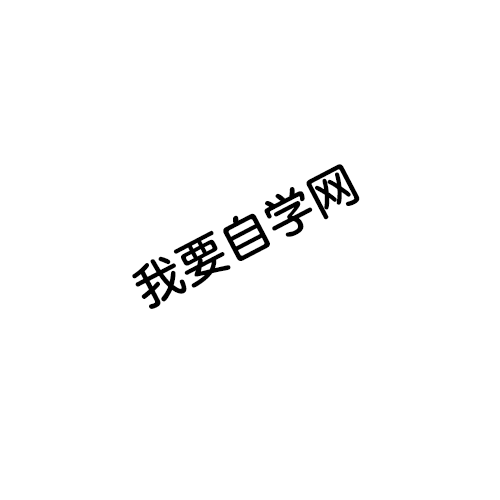
<style>
.page{position:relative;width:500px;height:500px;background:#ffffff}
.page>*{position:absolute;margin:0}
.t1{font:49px "Tensentype-JiaLiDaYuanJ";color:#000000}
</style>
<div class="page">
<p class="t1" style="left:132px;top:164px;width:228px;height:145px;rotate:-28deg">我要自学网</p>
</div>
